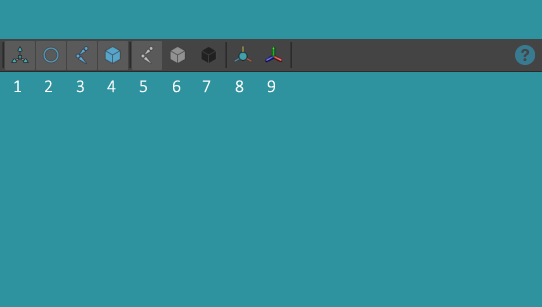
<style>
.page{position:relative;width:542px;height:307px;background:#2f939f}
.page>*{position:absolute;margin:0}
.t1{font:18px "Calibri-Light";letter-spacing:0.025em;color:#ffffff}
</style>
<div class="page">
<p class="t1" style="left:14px;top:80px;width:7px;height:12px">1</p>
<p class="t1" style="left:45px;top:80px;width:7px;height:12px">2</p>
<p class="t1" style="left:76px;top:80px;width:8px;height:13px">3</p>
<p class="t1" style="left:107px;top:80px;width:9px;height:13px">4</p>
<p class="t1" style="left:139px;top:80px;width:8px;height:13px">5</p>
<p class="t1" style="left:173px;top:80px;width:8px;height:13px">6</p>
<p class="t1" style="left:202px;top:80px;width:9px;height:13px">7</p>
<p class="t1" style="left:235px;top:80px;width:9px;height:13px">8</p>
<p class="t1" style="left:267px;top:80px;width:8px;height:13px">9</p>
</div>
